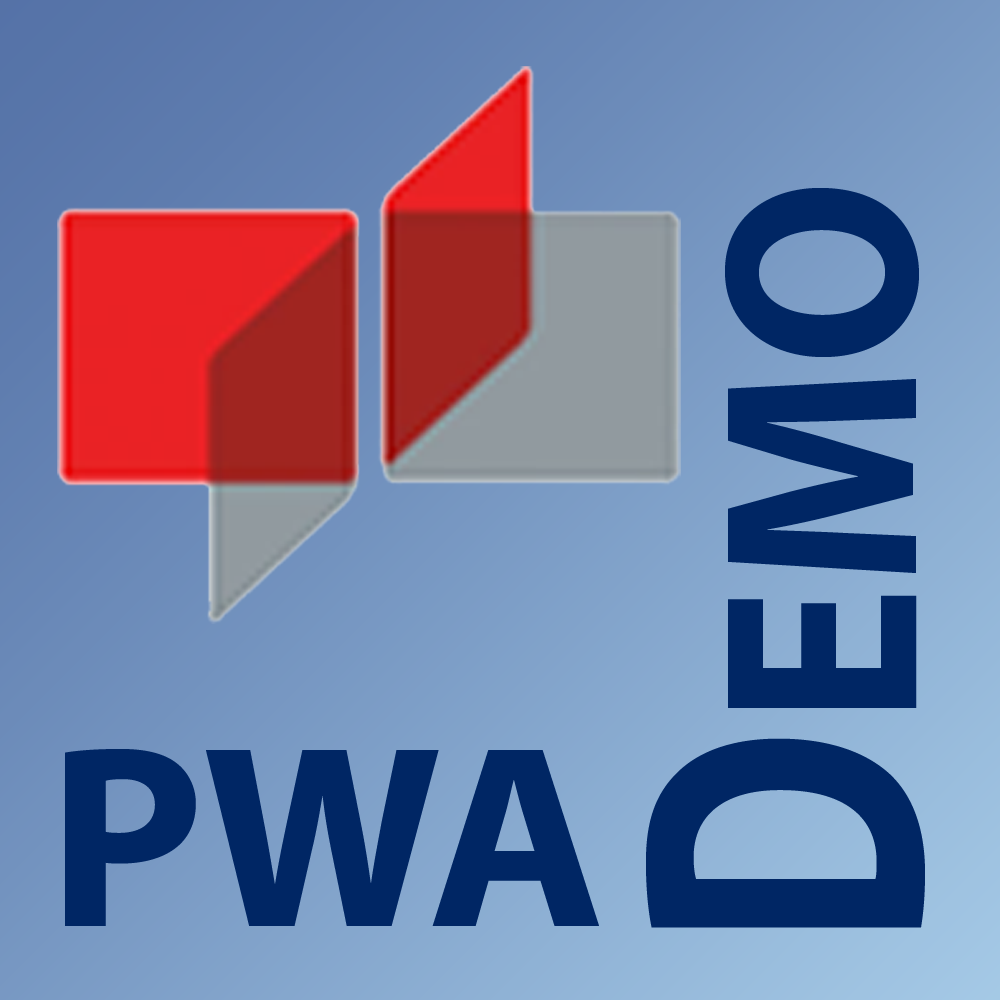
<style>
.page{position:relative;width:1000px;height:1000px}
.page>*{position:absolute;margin:0}
.t1{font:279.7px "MyriadPro-Bold";color:#002664;scale:0.93 1}
.t2{font:261.5px "MyriadPro-Bold";color:#002664;scale:1.03 1}
.t3{font:406.3px "MyriadPro-Bold";color:#002664;scale:0.78 1}
</style>
<div class="page">
<p class="t1" style="left:725px;top:188px;width:194px;height:520px;rotate:-90deg">EMO</p>
<p class="t2" style="left:65px;top:749px;width:534px;height:177px">PWA</p>
<p class="t3" style="left:646px;top:738px;width:279px;height:190px;rotate:-90deg">D</p>
</div>
